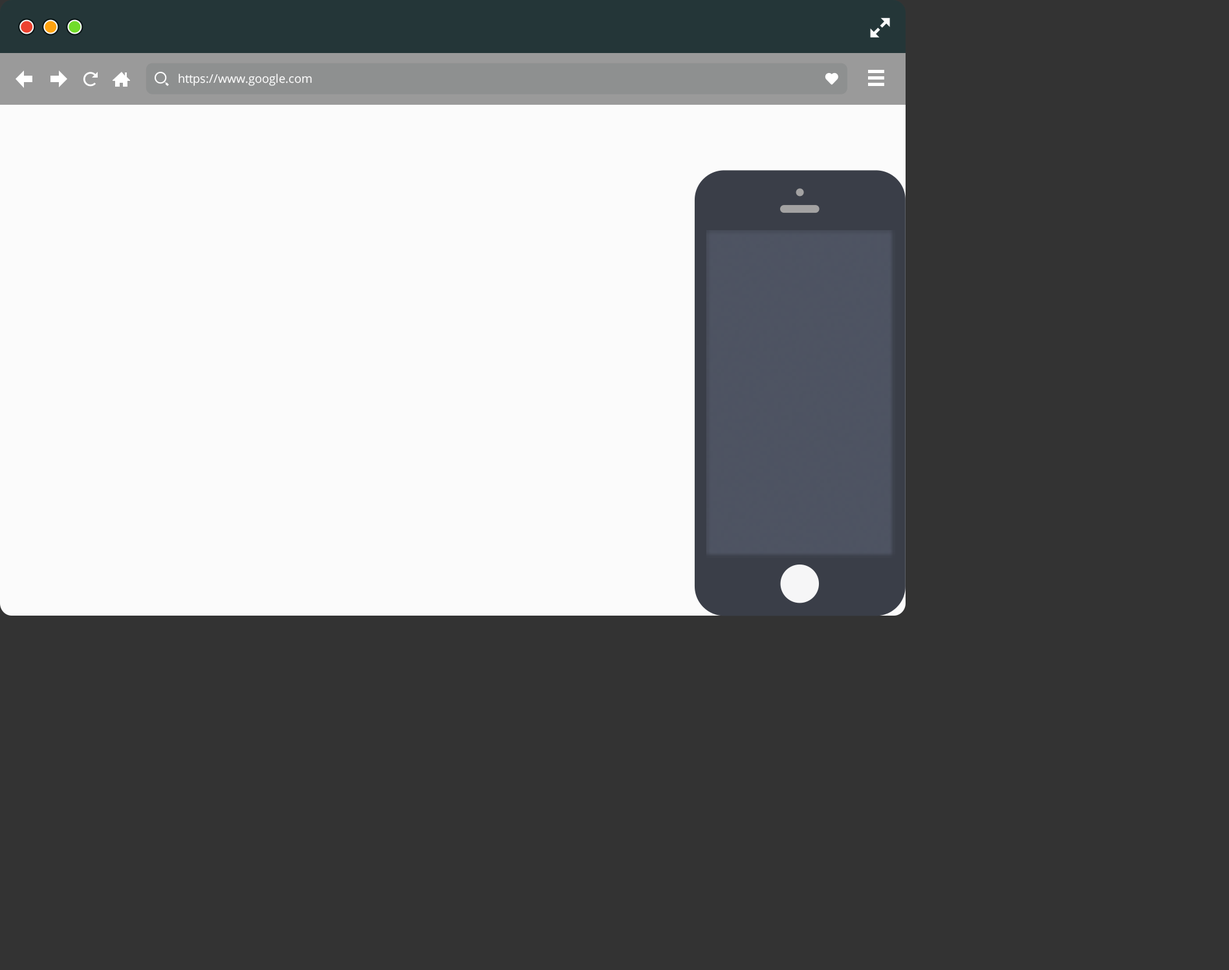
<style>
.page{position:relative;width:1229px;height:970px;background:#333333}
.page>*{position:absolute;margin:0}
.t1{font:11.8px "OpenSans";color:#ffffff}
</style>
<div class="page">
<p class="t1" style="left:179px;top:74px;width:133px;height:12px">https://www.google.com</p>
</div>
